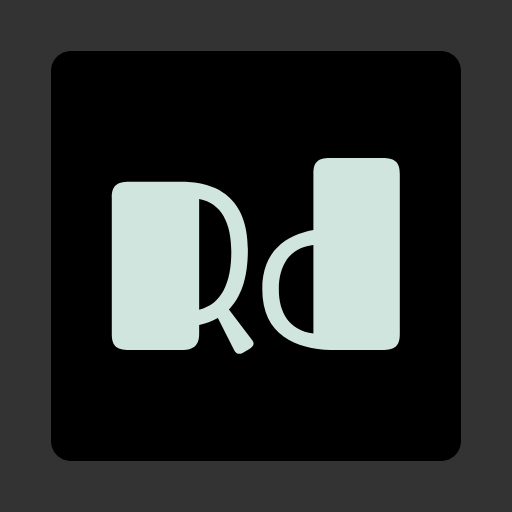
<style>
.page{position:relative;width:512px;height:512px;background:#000000}
.page>*{position:absolute;margin:0}
.t1{font:240px "Fascinate-Regular";color:#d0e5dd}
</style>
<div class="page">
<p class="t1" style="left:111px;top:158px;width:289px;height:196px">Rd</p>
</div>
